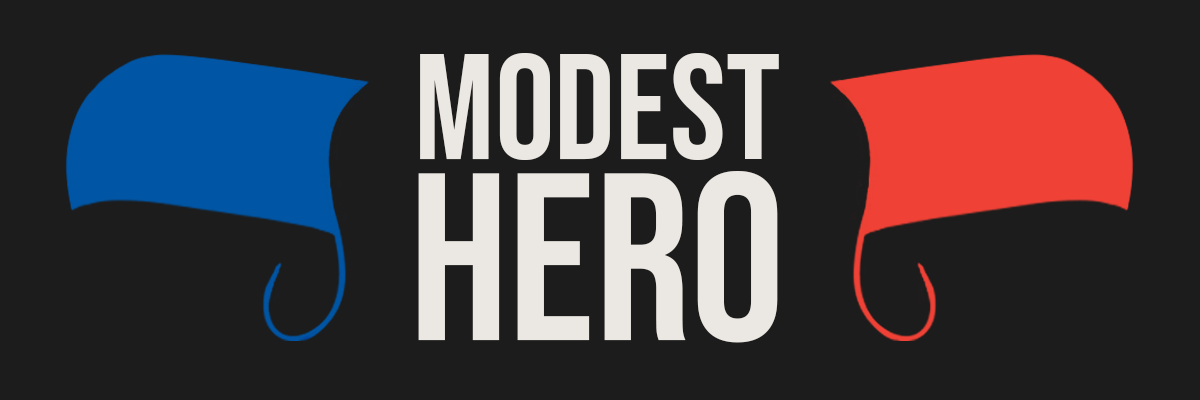
<style>
.page{position:relative;width:1200px;height:400px;background:#1c1c1c}
.page>*{position:absolute;margin:0}
.t1{font:150px/160px "BebasNeue-Regular";color:#ebe7e2}
.t2{font:238px/181px "BebasNeue-Regular";color:#ebe7e2}
</style>
<div class="page">
<p class="t1" style="left:418px;top:53px;width:361px;height:290px;text-align:center">Modest<br><span class="t2">Hero</span></p>
</div>
